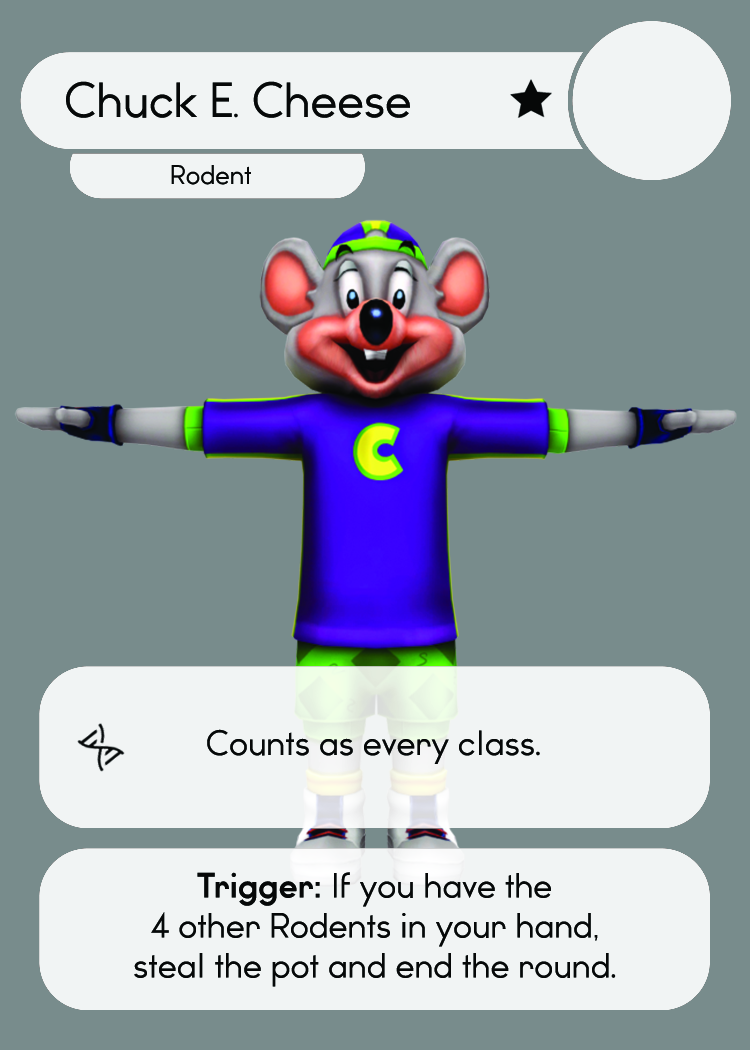
<style>
.page{position:relative;width:750px;height:1050px;background:#788c8c}
.page>*{position:absolute;margin:0}
.t1{font:46.7px "WatchwordRegularDemo";color:#060808}
.t2{font:33.3px "Dosis-Medium";color:#060808}
.t3{font:25.5px "WatchwordRegularDemo";color:#060808}
.t4{font:33.3px "WatchwordRegularDemo";color:#060808}
.t5{font:33.3px "WatchwordBoldDemo";color:#060808}
</style>
<div class="page">
<p class="t1" style="left:66px;top:81px;width:344px;height:37px">Chuck E<span class="t2">.</span> Cheese</p>
<p class="t3" style="left:171px;top:165px;width:80px;height:20px">Rodent</p>
<p class="t4" style="left:207px;top:729px;width:333px;height:35px">Counts as every class<span class="t2">.</span></p>
<p class="t4" style="left:134px;top:872px;width:482px;height:115px;text-align:center"><span class="t5">Trigger: </span>If you have the<br>4 other Rodents in your hand,<br>steal the pot and end the round<span class="t2">.</span></p>
</div>
